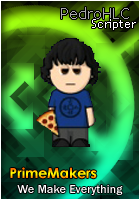
<style>
.page{position:relative;width:140px;height:200px}
.page>*{position:absolute;margin:0}
.t1{font:16px "TrebuchetMS";color:#aaaaaa}
.t2{font:12px "TrebuchetMS";color:#ffffff}
.t3{font:14px "CenturyGothic-Bold"}
.t4{font:12px "FranklinGothic-Medium";color:#ffffff}
</style>
<div class="page">
<p class="t1" style="left:61px;top:7px;width:68px;height:12px">PedroHLC</p>
<p class="t2" style="left:92px;top:19px;width:44px;height:11px">Scripter</p>
<p class="t3" style="left:10px;top:167px;width:87px;height:12px">PrimeMakers</p>
<p class="t4" style="left:17px;top:185px;width:106px;height:10px">We Make Everything</p>
</div>
